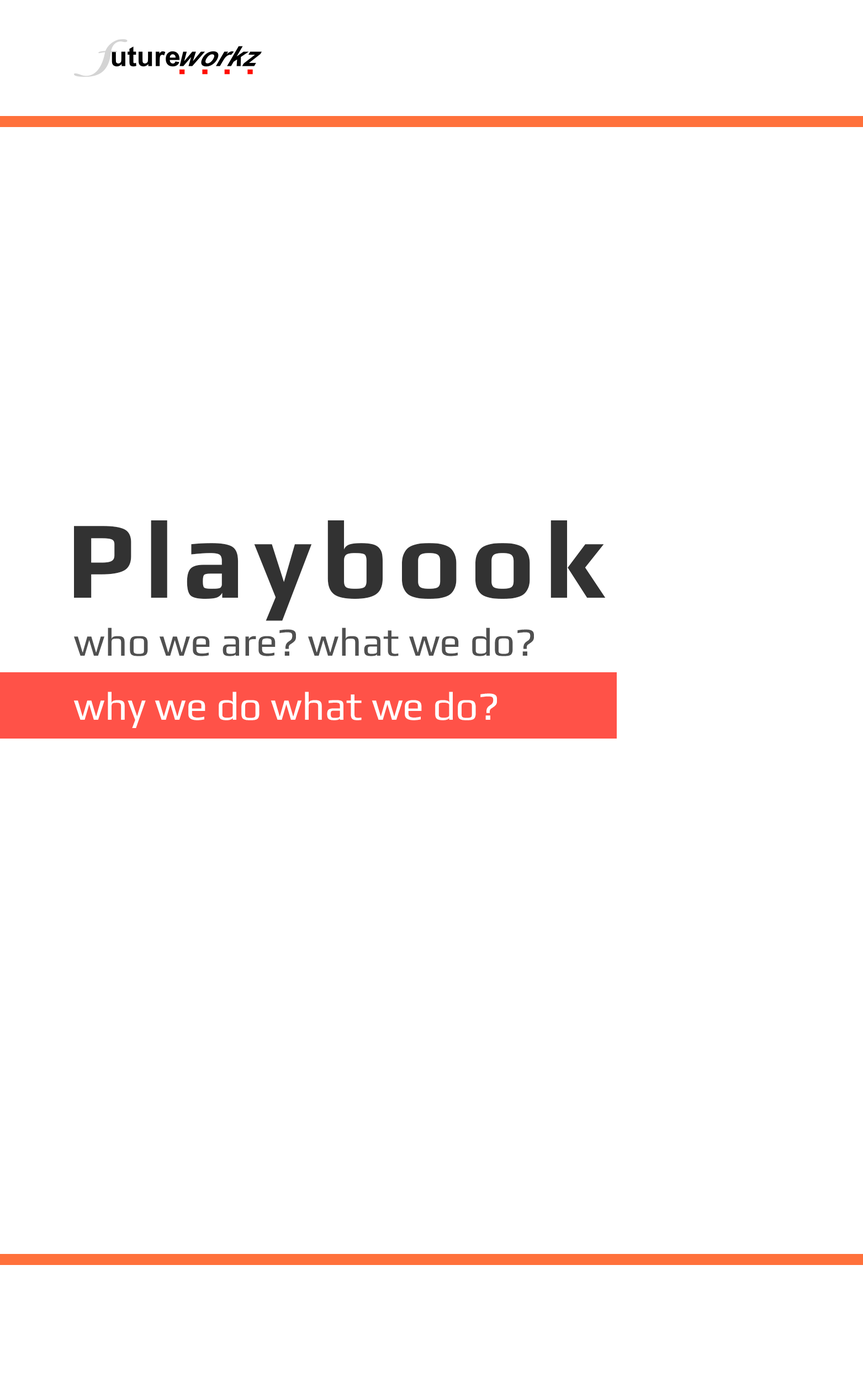
<style>
.page{position:relative;width:863px;height:1381px;background:#ffffff}
.page>*{position:absolute;margin:0}
.t1{font:110.5px "Play-Bold";letter-spacing:0.075em;color:#323232}
.t2{font:39.8px "Play";color:#505050}
.t3{font:39.8px "Play";color:#ffffff}
</style>
<div class="page">
<p class="t1" style="left:74px;top:520px;width:532px;height:101px">Playbook</p>
<p class="t2" style="left:73px;top:628px;width:461px;height:28px">who we are? what we do?</p>
<p class="t3" style="left:73px;top:692px;width:424px;height:36px">why we do what we do?</p>
</div>
